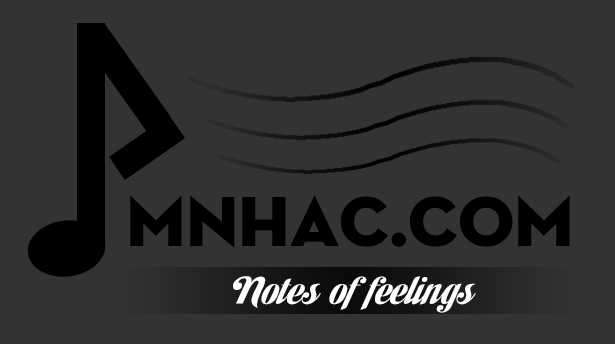
<style>
.page{position:relative;width:615px;height:344px;background:#333333}
.page>*{position:absolute;margin:0}
.t1{font:72px "UTM-Neutra";color:#000000}
.t2{font:36px "UTM-Habano";color:#ffffff;scale:1.2 1}
</style>
<div class="page">
<p class="t1" style="left:130px;top:195px;width:440px;height:53px">mnhac.com</p>
<p class="t2" style="left:233px;top:276px;width:243px;height:37px">Notes of feelings</p>
</div>
